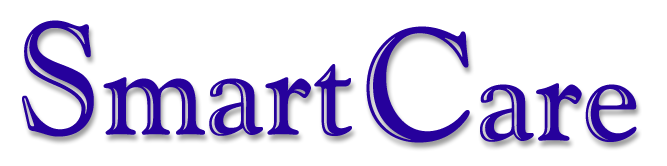
<style>
.page{position:relative;width:667px;height:166px;background:#ffffff}
.page>*{position:absolute;margin:0}
.t1{font:127px "GoudyHandtooledBT-Regular";color:#26019c}
.t2{font:158.8px "GoudyHandtooledBT-Regular";color:#26019c}
</style>
<div class="page">
<p class="t1" style="left:22px;top:20px;width:330px;height:117px"><span class="t2">S</span>mart</p>
<p class="t1" style="left:366px;top:26px;width:271px;height:117px"><span class="t2">C</span>are</p>
</div>
